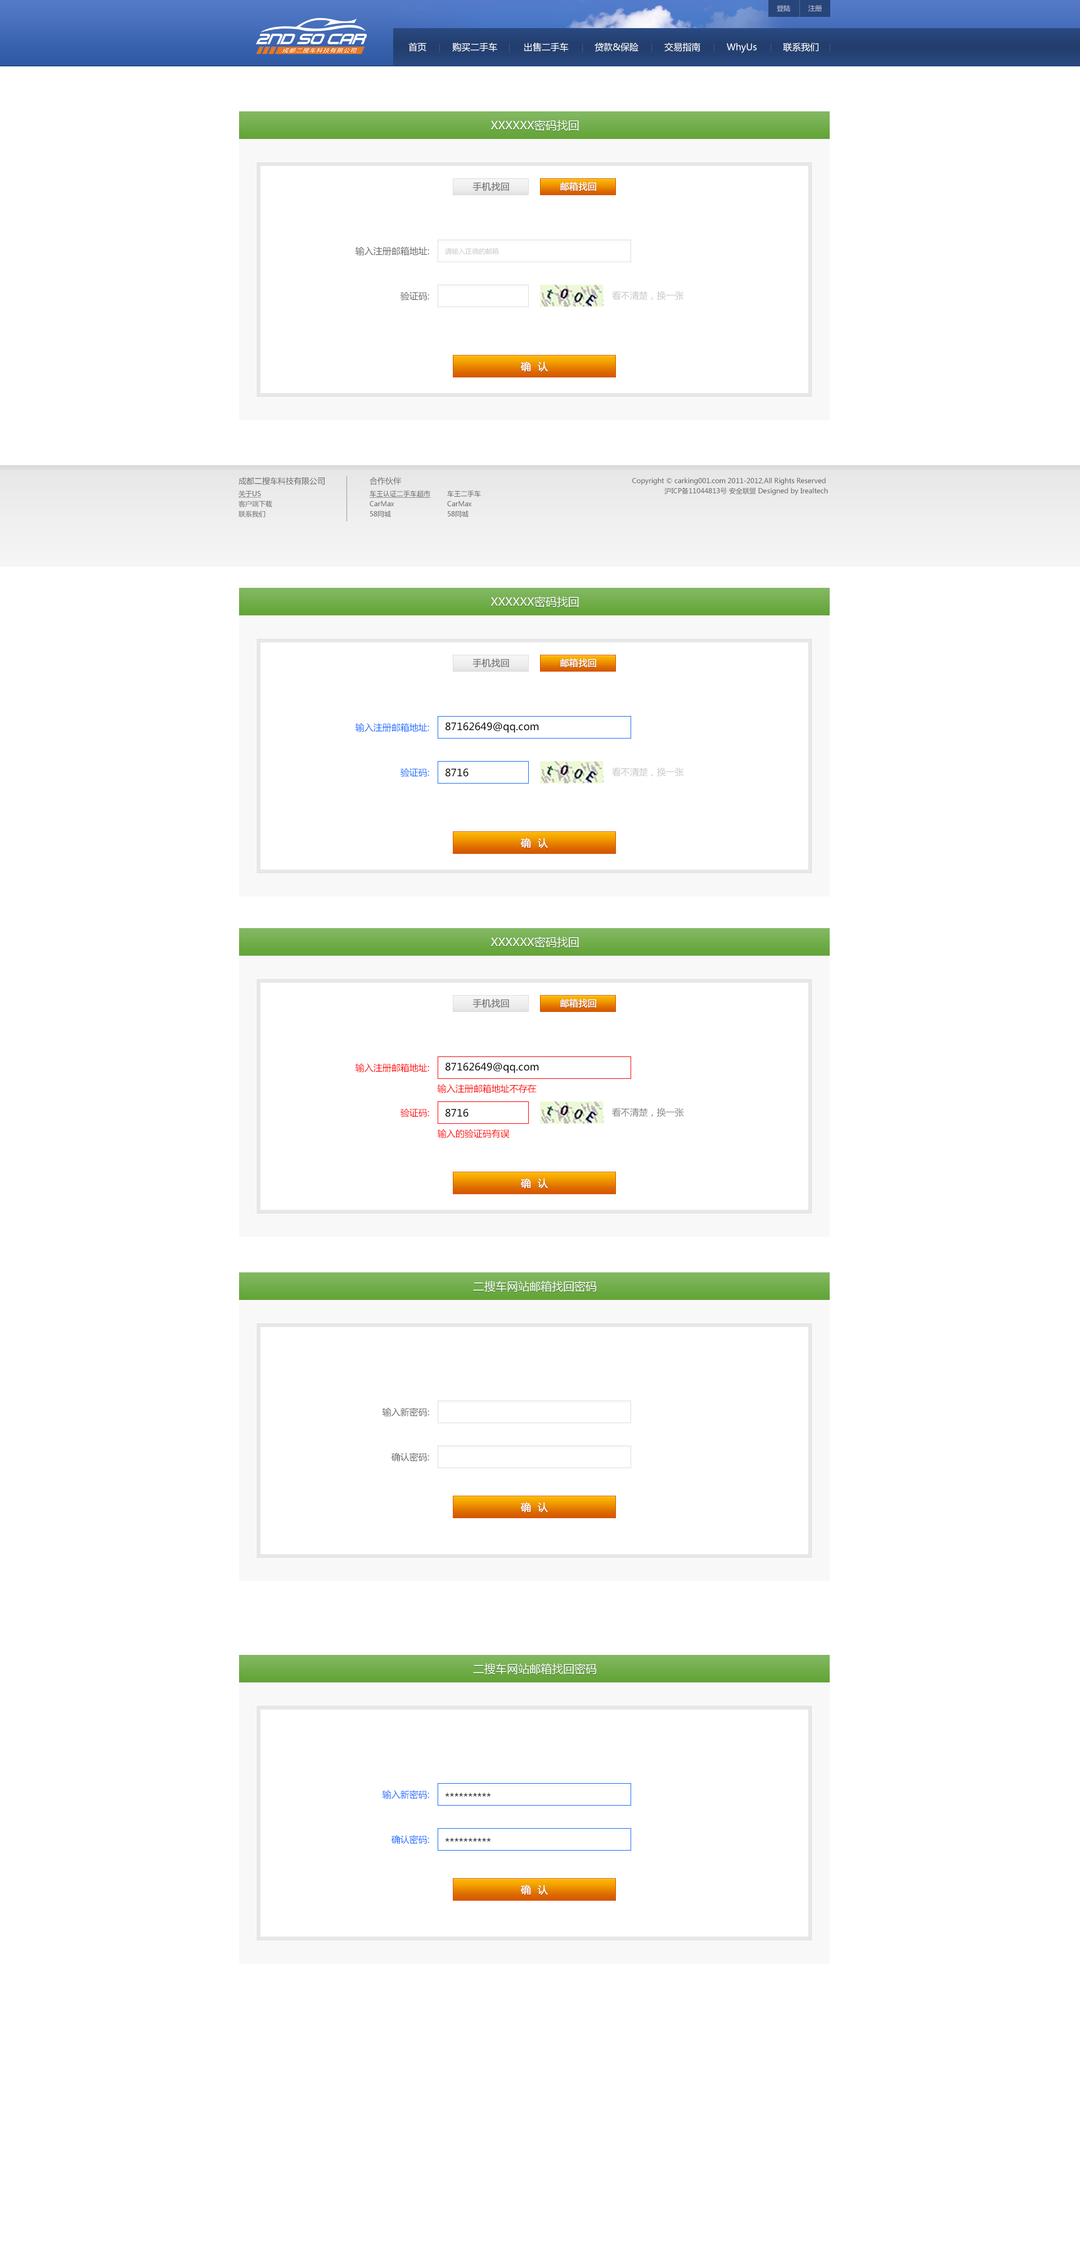
<style>
.page{position:relative;width:1080px;height:2250px;background:#ffffff}
.page>*{position:absolute;margin:0}
.t1{font:6.8px "MicrosoftYaHei";color:#bdc3d1}
.t2{font:9px "MicrosoftYaHei";color:#ffffff}
.t3{font:11.2px "MicrosoftYaHei";color:#ffffff;text-transform:uppercase}
.t4{font:9px "MicrosoftYaHei";color:#7f7f7f;text-transform:uppercase;font-weight:bold}
.t5{font:9px "MicrosoftYaHei";color:#ffffff;text-transform:uppercase;font-weight:bold}
.t6{font:9px "MicrosoftYaHei";color:#666666;text-transform:uppercase}
.t7{font:6.8px "MicrosoftYaHei";color:#c8c8c8}
.t8{font:9px "MicrosoftYaHei";color:#c8c8c8;text-transform:uppercase}
.t9{font:10.1px "MicrosoftYaHei";color:#ffffff;text-transform:uppercase;font-weight:bold}
.t10{font:7.9px "MicrosoftYaHei";color:#666666}
.t11{font:6.8px/10.1px "MicrosoftYaHei";color:#666666}
.t12{font:7.9px/13.5px "MicrosoftYaHei";color:#666666}
.t13{font:6.8px/10.1px "MicrosoftYaHei";color:#666666;text-decoration:underline}
.t14{font:9px "MicrosoftYaHei";color:#156bff;text-transform:uppercase}
.t15{font:10.1px "MicrosoftYaHei";color:#000000}
.t16{font:9px "MicrosoftYaHei";color:#ff0000;text-transform:uppercase}
.t17{font:9px "MicrosoftYaHei";color:#828282;text-transform:uppercase}
</style>
<div class="page">
<p class="t1" style="left:777px;top:5px;width:45px;height:7px">登陆         注册</p>
<p class="t2" style="left:408px;top:42px;width:410px;height:11px">首页 购买二手车 出售二手车 贷款&amp;保险 交易指南 WhyUs 联系我们</p>
<p class="t3" style="left:490px;top:120px;width:89px;height:11px">XXXXXX密码找回</p>
<p class="t4" style="left:472px;top:182px;width:37px;height:9px">手机找回</p>
<p class="t5" style="left:560px;top:182px;width:36px;height:9px">邮箱找回</p>
<p class="t6" style="left:356px;top:246px;width:73px;height:10px">输入注册邮箱地址:</p>
<p class="t7" style="left:445px;top:248px;width:54px;height:7px">请输入正确的邮箱</p>
<p class="t6" style="left:400px;top:291px;width:29px;height:9px">验证码:</p>
<p class="t8" style="left:612px;top:291px;width:72px;height:9px">看不清楚，换一张</p>
<p class="t9" style="left:520px;top:362px;width:28px;height:10px">确  认</p>
<p class="t10" style="left:238px;top:477px;width:87px;height:8px">成都二搜车科技有限公司</p>
<p class="t11" style="left:370px;top:477px;width:61px;height:41px"><span class="t12">合作伙伴<br></span><span class="t13">车王认证二手车超市<br></span>CarMax<br>58同城</p>
<p class="t11" style="left:632px;top:478px;width:196px;height:17px;text-align:right">Copyright © carking001.com 2011-2012,All Rights Reserved <br>沪ICP备11044813号 安全联盟 Designed by Irealtech</p>
<p class="t11" style="left:238px;top:490px;width:34px;height:28px"><span class="t13">关于US<br></span>客户端下载<br>联系我们</p>
<p class="t11" style="left:447px;top:490px;width:34px;height:28px">车王二手车<br>CarMax<br>58同城</p>
<p class="t3" style="left:490px;top:596px;width:89px;height:12px">XXXXXX密码找回</p>
<p class="t4" style="left:472px;top:658px;width:37px;height:10px">手机找回</p>
<p class="t5" style="left:560px;top:658px;width:36px;height:10px">邮箱找回</p>
<p class="t14" style="left:356px;top:723px;width:73px;height:9px">输入注册邮箱地址:</p>
<p class="t15" style="left:446px;top:722px;width:93px;height:11px">87162649@qq.com</p>
<p class="t14" style="left:400px;top:768px;width:29px;height:9px">验证码:</p>
<p class="t15" style="left:446px;top:768px;width:23px;height:9px">8716</p>
<p class="t8" style="left:612px;top:767px;width:72px;height:10px">看不清楚，换一张</p>
<p class="t9" style="left:520px;top:838px;width:28px;height:10px">确  认</p>
<p class="t3" style="left:490px;top:937px;width:89px;height:11px">XXXXXX密码找回</p>
<p class="t4" style="left:472px;top:998px;width:37px;height:10px">手机找回</p>
<p class="t5" style="left:560px;top:998px;width:36px;height:10px">邮箱找回</p>
<p class="t16" style="left:356px;top:1063px;width:73px;height:10px">输入注册邮箱地址:</p>
<p class="t15" style="left:446px;top:1063px;width:93px;height:10px">87162649@qq.com</p>
<p class="t16" style="left:437px;top:1084px;width:100px;height:10px">输入注册邮箱地址不存在</p>
<p class="t16" style="left:400px;top:1108px;width:29px;height:9px">验证码:</p>
<p class="t15" style="left:446px;top:1109px;width:23px;height:8px">8716</p>
<p class="t17" style="left:612px;top:1108px;width:72px;height:9px">看不清楚，换一张</p>
<p class="t16" style="left:438px;top:1129px;width:72px;height:9px">输入的验证码有误</p>
<p class="t9" style="left:520px;top:1178px;width:28px;height:11px">确  认</p>
<p class="t3" style="left:473px;top:1281px;width:123px;height:11px">二搜车网站邮箱找回密码</p>
<p class="t6" style="left:382px;top:1407px;width:47px;height:10px">输入新密码:</p>
<p class="t6" style="left:392px;top:1452px;width:37px;height:10px">确认密码:</p>
<p class="t9" style="left:520px;top:1502px;width:28px;height:11px">确  认</p>
<p class="t3" style="left:473px;top:1663px;width:123px;height:12px">二搜车网站邮箱找回密码</p>
<p class="t14" style="left:382px;top:1790px;width:47px;height:9px">输入新密码:</p>
<p class="t15" style="left:445px;top:1793px;width:46px;height:4px">**********</p>
<p class="t14" style="left:392px;top:1835px;width:37px;height:9px">确认密码:</p>
<p class="t15" style="left:445px;top:1838px;width:46px;height:4px">**********</p>
<p class="t9" style="left:520px;top:1885px;width:28px;height:10px">确  认</p>
</div>
